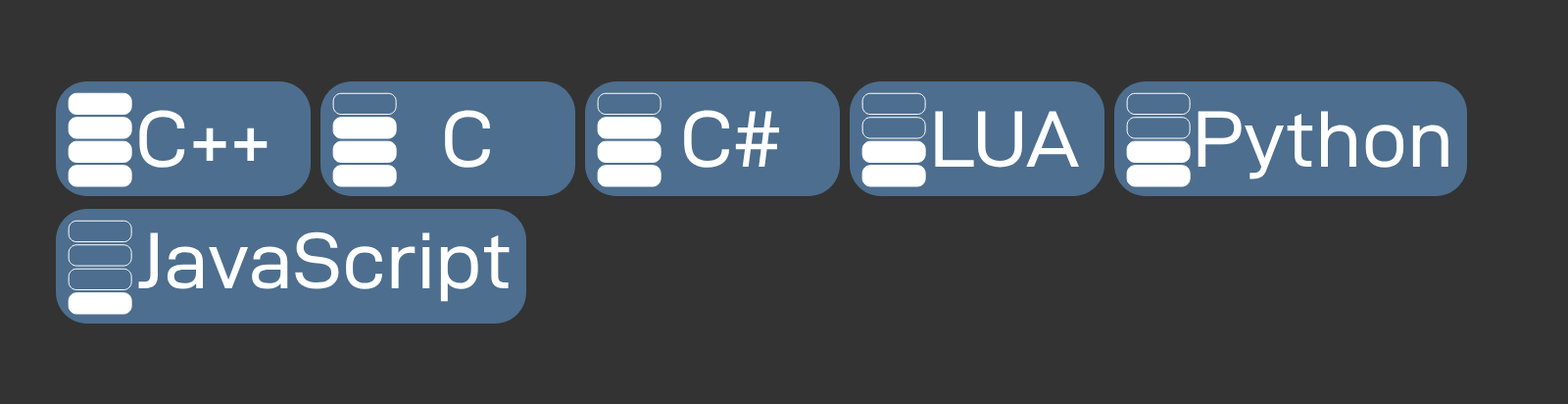
<style>
.page{position:relative;width:1568px;height:404px;background:#333333}
.page>*{position:absolute;margin:0}
.t1{font:80.4px "D-DINExp";color:#ffffff}
</style>
<div class="page">
<p class="t1" style="left:139px;top:110px;width:129px;height:58px">C++</p>
<p class="t1" style="left:445px;top:110px;width:46px;height:58px">C</p>
<p class="t1" style="left:684px;top:110px;width:96px;height:58px">C#</p>
<p class="t1" style="left:935px;top:111px;width:144px;height:57px">LUA</p>
<p class="t1" style="left:1198px;top:111px;width:250px;height:68px">Python</p>
<p class="t1" style="left:138px;top:231px;width:372px;height:71px">JavaScript</p>
</div>
